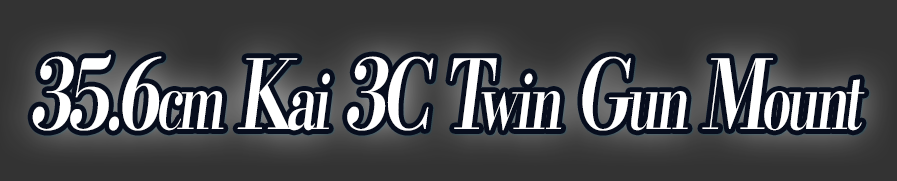
<style>
.page{position:relative;width:897px;height:181px;background:#333333}
.page>*{position:absolute;margin:0}
.t1{font:96px "KochoStd-Heavy";letter-spacing:-0.08em;color:#ffffff;font-style:italic;scale:0.71 1}
.t2{font:76.8px "KochoStd-Heavy";letter-spacing:-0.08em;color:#ffffff;font-style:italic;scale:0.71 1}
</style>
<div class="page">
<p class="t1" style="left:32px;top:54px;width:833px;height:77px">35.6<span class="t2">cm</span> K<span class="t2">ai</span> 3C T<span class="t2">win</span> G<span class="t2">un</span> M<span class="t2">ount</span></p>
</div>
